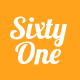
<style>
.page{position:relative;width:80px;height:80px;background:#ffa21c}
.page>*{position:absolute;margin:0}
.t1{font:30px/25px "Lobster1.4";color:#ffffff}
</style>
<div class="page">
<p class="t1" style="left:10px;top:16px;width:57px;height:49px;text-align:center">Sixty<br>One</p>
</div>
